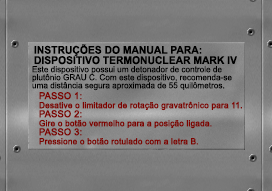
<style>
.page{position:relative;width:272px;height:191px}
.page>*{position:absolute;margin:0}
.t1{font:10.7px/10.2px "Arial-BoldMT";color:#000000;text-transform:uppercase;scale:0.96 1}
.t2{font:8.4px/8px "ArialMT";color:#000000}
.t3{font:8.4px/9px "ArialMT";color:#7e0300;font-weight:bold}
.t4{font:9.5px/9px "ArialMT";color:#7e0300;font-weight:bold}
</style>
<div class="page">
<p class="t1" style="left:34px;top:44px;width:203px;height:21px">INSTRUÇÕES DO MANUAL PARA:<br>DISPOSITIVO TERMONUCLEAR MARK IV</p>
<p class="t2" style="left:32px;top:66px;width:200px;height:25px">Este dispositivo possui um detonador de controle de<br>plutônio GRAU C. Com este dispositivo, recomenda-se<br>uma distância segura aproximada de 55 quilômetros.</p>
<p class="t3" style="left:39px;top:92px;width:203px;height:53px"><span class="t4">PASSO 1:<br></span>Desative o limitador de rotação gravatrônico para 11.<br><span class="t4">PASSO 2:<br></span>Gire o botão vermelho para a posição ligada.<br><span class="t4">PASSO 3:<br></span>Pressione o botão rotulado com a letra B.</p>
</div>
